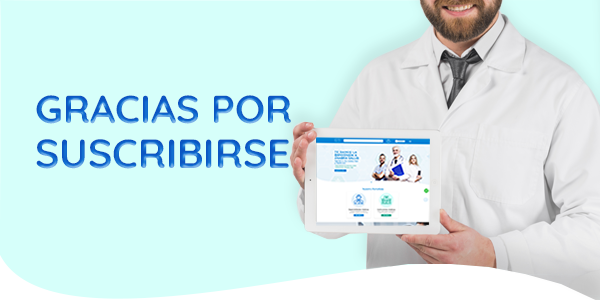
<style>
.page{position:relative;width:600px;height:300px;background:#d6fffa}
.page>*{position:absolute;margin:0}
.t1{font:38.9px "Quicksand-Bold";color:#1169cd}
.t2{font:40.6px "Quicksand-Bold";color:#1168cd}
</style>
<div class="page">
<p class="t1" style="left:36px;top:95px;width:255px;height:29px">GRACIAS POR</p>
<p class="t2" style="left:36px;top:139px;width:253px;height:30px">SUSCRIBIRSE</p>
</div>
